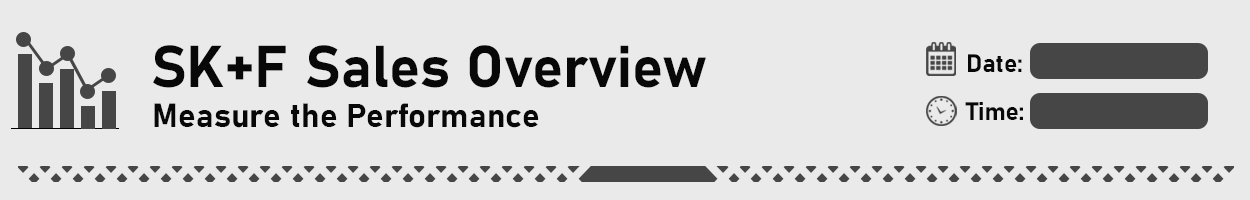
<style>
.page{position:relative;width:1250px;height:200px;background:#eaeaea}
.page>*{position:absolute;margin:0}
.t1{font:58.3px "Bahnschrift-Bold";color:#080808}
.t2{font:25px "Bahnschrift-Bold";color:#080808}
.t3{font:33.3px "Bahnschrift-Bold";color:#080808}
</style>
<div class="page">
<p class="t1" style="left:153px;top:45px;width:133px;height:43px">SK+F</p>
<p class="t1" style="left:307px;top:45px;width:399px;height:43px">Sales Overview</p>
<p class="t2" style="left:968px;top:54px;width:54px;height:18px">Date:</p>
<p class="t2" style="left:965px;top:102px;width:58px;height:18px">Time:</p>
<p class="t3" style="left:154px;top:103px;width:385px;height:25px">Measure the Performance</p>
</div>
